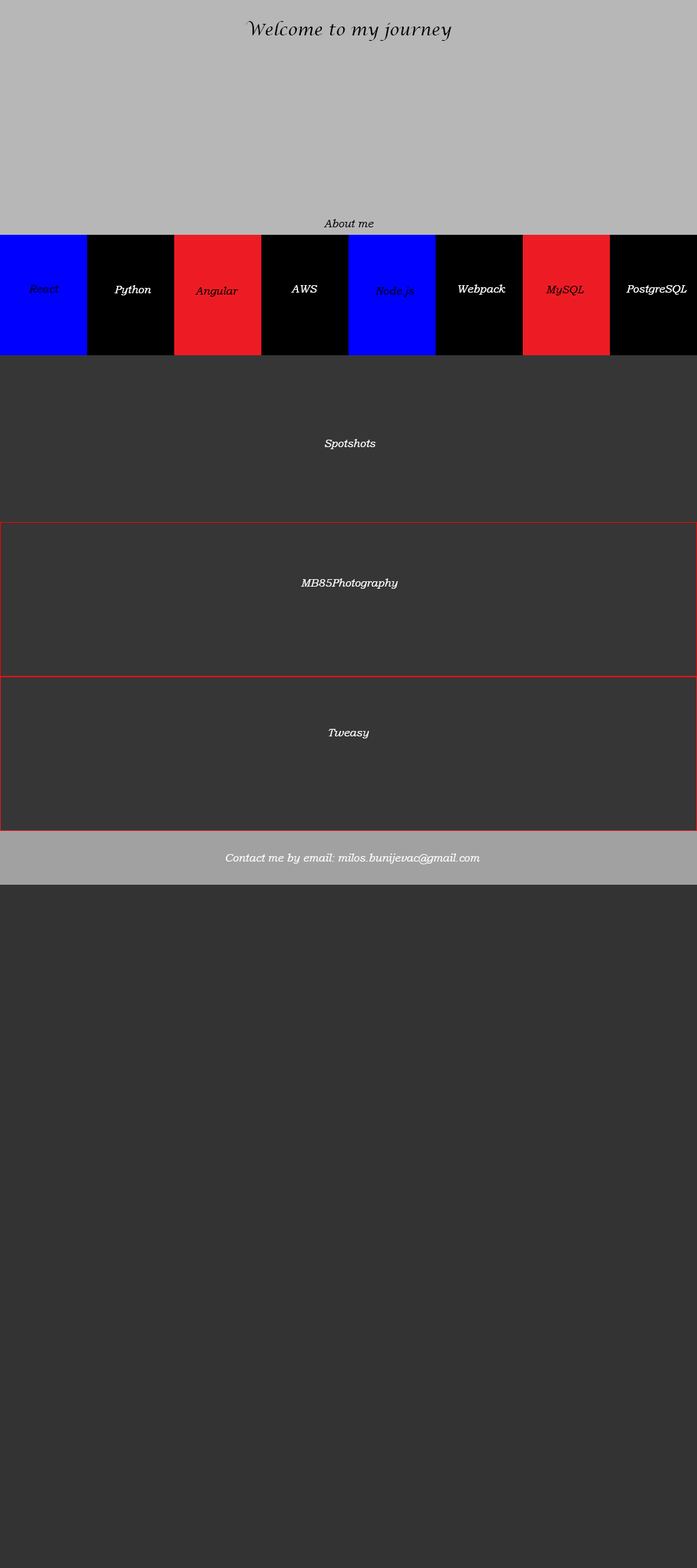
<style>
.page{position:relative;width:697px;height:1568px;background:#333333}
.page>*{position:absolute;margin:0}
.t1{font:16.3px "LucidaCalligraphy-Italic";color:#000000}
.t2{font:10.9px "BookmanOldStyle-Italic";color:#000000}
.t3{font:10.9px "BookmanOldStyle-Italic";color:#ffffff}
</style>
<div class="page">
<p class="t1" style="left:246px;top:21px;width:205px;height:20px">Welcome to my journey</p>
<p class="t2" style="left:324px;top:219px;width:50px;height:8px">About me</p>
<p class="t2" style="left:29px;top:285px;width:30px;height:8px">React</p>
<p class="t3" style="left:114px;top:285px;width:37px;height:10px">Python</p>
<p class="t2" style="left:195px;top:287px;width:43px;height:10px">Angular</p>
<p class="t3" style="left:291px;top:285px;width:26px;height:8px">AWS</p>
<p class="t2" style="left:375px;top:287px;width:39px;height:10px">Node.js</p>
<p class="t3" style="left:458px;top:284px;width:48px;height:11px">Webpack</p>
<p class="t2" style="left:546px;top:286px;width:38px;height:9px">MySQL</p>
<p class="t3" style="left:626px;top:285px;width:61px;height:10px">PostgreSQL</p>
<p class="t3" style="left:325px;top:439px;width:51px;height:10px">Spotshots</p>
<p class="t3" style="left:301px;top:578px;width:97px;height:11px">MB85Photography</p>
<p class="t3" style="left:329px;top:729px;width:40px;height:9px">Tweasy</p>
<p class="t3" style="left:225px;top:853px;width:255px;height:11px">Contact me by email: milos.bunijevac@gmail.com</p>
</div>
